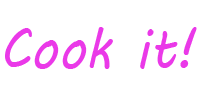
<style>
.page{position:relative;width:200px;height:100px;background:#ffffff}
.page>*{position:absolute;margin:0}
.t1{font:58.3px "MVBoli";color:#ea39e8;scale:0.89 1}
</style>
<div class="page">
<p class="t1" style="left:5px;top:27px;width:192px;height:42px">Cook it!</p>
</div>
